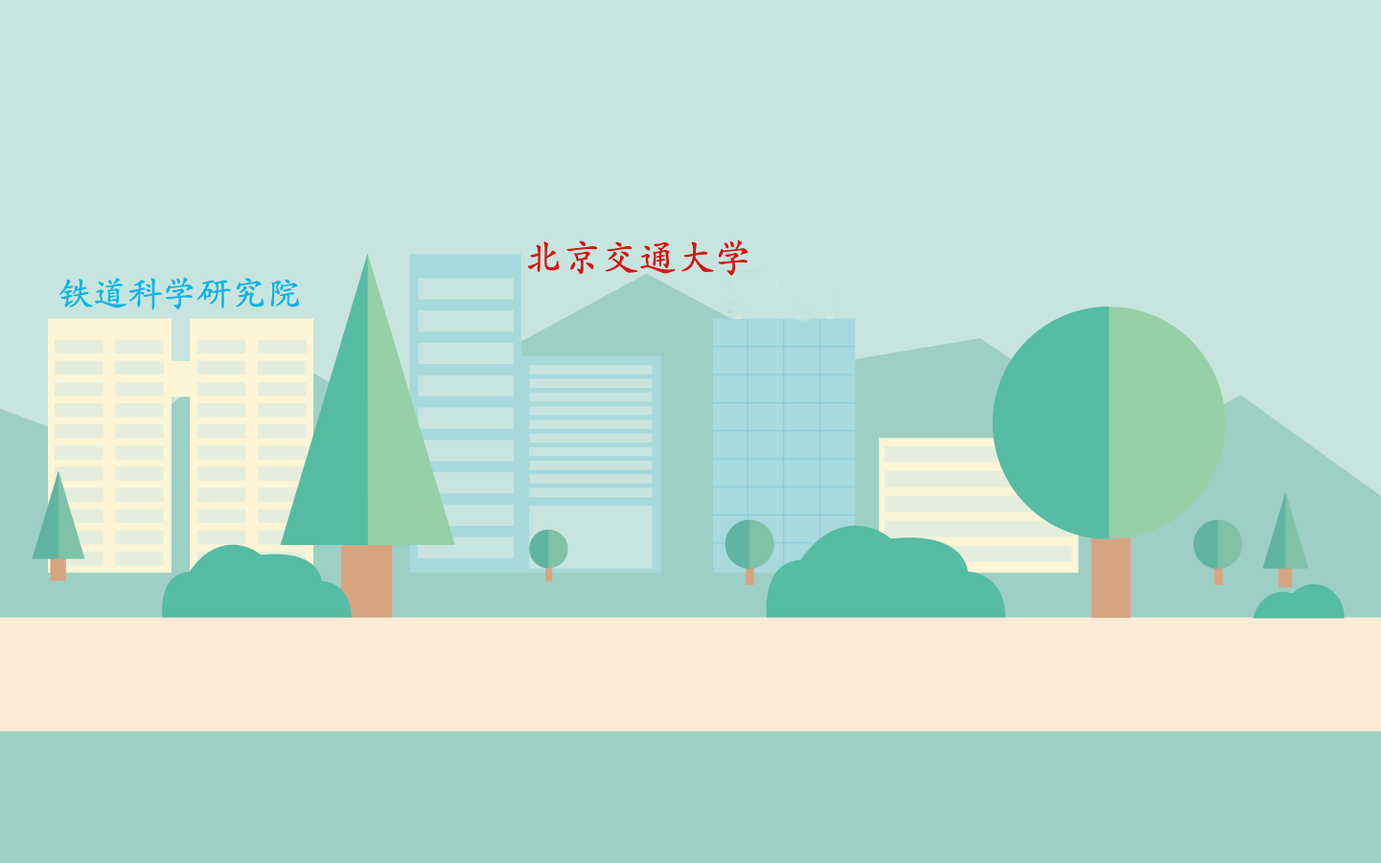
<style>
.page{position:relative;width:1381px;height:863px;background:#c7e5de}
.page>*{position:absolute;margin:0}
.t1{font:38px "STKaiti";color:#d31712}
.t2{font:34.7px "STKaiti";color:#06b6e7}
</style>
<div class="page">
<p class="t1" style="left:527px;top:241px;width:221px;height:35px">北京交通大学</p>
<p class="t2" style="left:59px;top:277px;width:240px;height:34px">铁道科学研究院</p>
</div>
